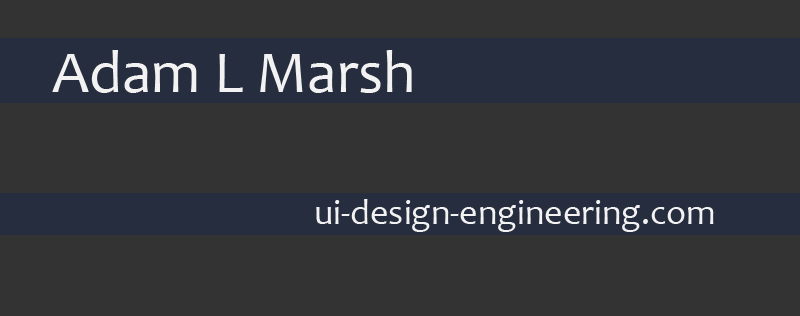
<style>
.page{position:relative;width:800px;height:316px;background:#333333}
.page>*{position:absolute;margin:0}
.t1{font:60px "Candara";color:#f2f2f2}
.t2{font:36px "Candara";color:#f2f2f2}
</style>
<div class="page">
<p class="t1" style="left:52px;top:50px;width:360px;height:43px">Adam L Marsh</p>
<p class="t2" style="left:316px;top:199px;width:398px;height:33px">ui-design-engineering.com</p>
</div>
